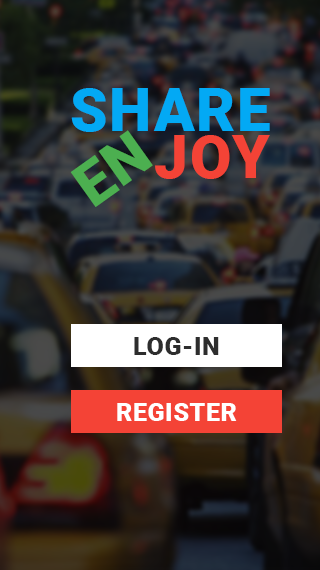
<style>
.page{position:relative;width:320px;height:570px}
.page>*{position:absolute;margin:0}
.t1{font:60.4px/46.8px "Roboto-Black";letter-spacing:0.025em;color:#03a9f4}
.t2{font:60.4px/46.8px "Roboto-Black";letter-spacing:0.025em;color:#f44336}
.t3{font:60.4px "Roboto-Black";letter-spacing:0.025em;color:#4caf50}
.t4{font:25px "Roboto-Black";letter-spacing:0.025em;color:#2d2d2d}
.t5{font:25px "Roboto-Black";letter-spacing:0.025em;color:#ffffff}
</style>
<div class="page">
<p class="t1" style="left:71px;top:88px;width:199px;height:91px;text-align:center">SHARE<br>     <span class="t2">JOY</span></p>
<p class="t3" style="left:70px;top:130px;width:83px;height:77px;rotate:-35deg">EN</p>
<p class="t4" style="left:134px;top:337px;width:85px;height:18px">LOG-IN</p>
<p class="t5" style="left:117px;top:403px;width:120px;height:18px">REGISTER</p>
</div>
